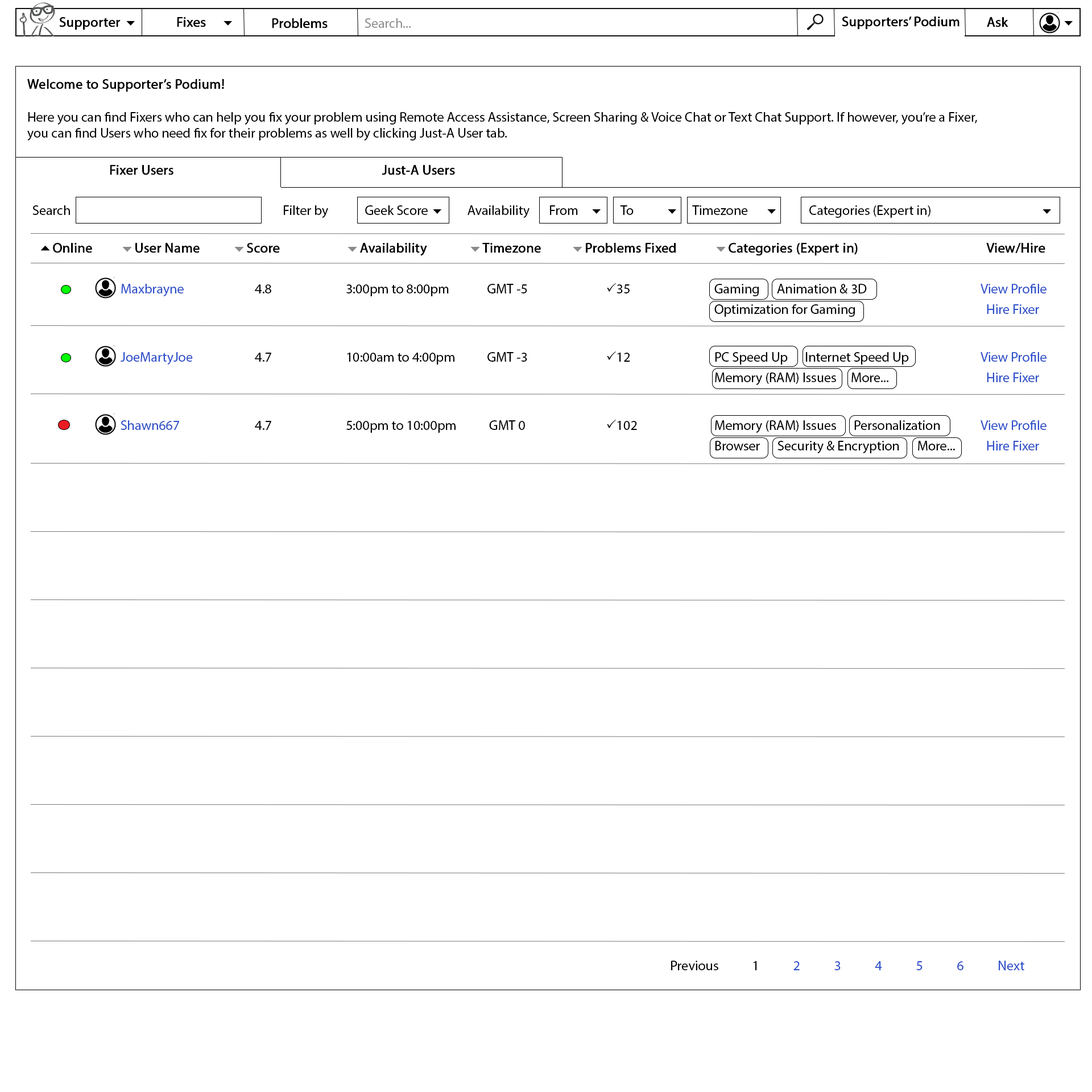
<style>
.page{position:relative;width:1092px;height:1092px;background:#ffffff}
.page>*{position:absolute;margin:0}
.t1{font:13.6px "MyriadPro-Regular";color:#000000;font-weight:bold}
.t2{font:13.6px "MyriadPro-Regular";color:#010000;font-weight:bold}
.t3{font:13.6px "MyriadPro-Regular";color:#919090}
.t4{font:13.6px "MyriadPro-Regular";color:#000000}
.t5{font:13.6px/20.5px "MyriadPro-Regular";color:#000000;font-weight:bold}
.t6{font:13.6px "Webdings";color:#000000}
.t7{font:13.6px/27.3px "MyriadPro-Regular";color:#000000}
.t8{font:13.6px/20.5px "Webdings";color:#000000;font-weight:bold}
.t9{font:13.6px/20.5px "Webdings";color:#8b8b8b;font-weight:bold}
.t10{font:13.6px/20.5px "MyriadPro-Regular";color:#2d4fc9}
.t11{font:13.6px/20.5px "MyriadPro-Regular";color:#000000}
.t12{font:13.6px/20.5px "Wingdings2";color:#000000}
.t13{font:13.6px/27.3px "MyriadPro-Regular";color:#2d4fc9}
.t14{font:13.6px/27.3px "Wingdings2";color:#000000}
.t15{font:13.6px "MyriadPro-Regular";color:#2d4fc9}
</style>
<div class="page">
<p class="t1" style="left:59px;top:17px;width:62px;height:13px">Supporter</p>
<p class="t1" style="left:177px;top:17px;width:29px;height:10px">Fixes</p>
<p class="t2" style="left:842px;top:16px;width:117px;height:14px">Supporters’ Podium</p>
<p class="t1" style="left:987px;top:17px;width:21px;height:10px">Ask</p>
<p class="t1" style="left:272px;top:18px;width:56px;height:10px">Problems</p>
<p class="t3" style="left:365px;top:18px;width:46px;height:10px">Search...</p>
<p class="t4" style="left:27px;top:79px;width:950px;height:96px"><span class="t1">Welcome to Supporter’s Podium!<br><br></span>Here you can find Fixers who can help you fix your problem using Remote Access Assistance, Screen Sharing &amp; Voice Chat or Text Chat Support. If however, you’re a Fixer, <br>you can find Users who need fix for their problems as well by clicking Just-A User tab.<br><br>    <span class="t5">Fixer Users            Just-A Users</span></p>
<p class="t4" style="left:32px;top:205px;width:38px;height:10px">Search</p>
<p class="t4" style="left:284px;top:205px;width:768px;height:13px">Filter by       Geek Score <span class="t6">6</span>  Availability   From    <span class="t6">6</span>      To      <span class="t6">6</span> Timezone      <span class="t6">6</span>      Categories (Expert in)      <span class="t6">6</span></p>
<p class="t7" style="left:40px;top:243px;width:1006px;height:210px"><span class="t8">5</span><span class="t5">Online  </span><span class="t9">6</span><span class="t5">User Name     </span><span class="t9">6</span><span class="t5">Score     </span><span class="t9">6</span><span class="t5">Availability   </span><span class="t9">6</span><span class="t5">Timezone  </span><span class="t9">6</span><span class="t5">Problems Fixed  </span><span class="t9">6</span><span class="t5">Categories (Expert in)        View/Hire<br><br>    </span><span class="t10">Maxbrayne</span><span class="t11">       4.8    3:00pm to 8:00pm             GMT -5         </span><span class="t12">P</span><span class="t11">35     Gaming      Animation &amp; 3D      </span><span class="t10">View Profile<br></span><span class="t11">                                 Optimization for Gaming         </span><span class="t10">Hire Fixer<br><br>    </span><span class="t13">JoeMartyJoe</span>       4.7    10:00am to 4:00pm           GMT -3         <span class="t14">P</span>12     PC Speed Up      Internet Speed Up    <span class="t13">View Profile<br></span><span class="t11">                                 Memory (RAM) Issues     More...       </span><span class="t10">Hire Fixer<br><br>    Shawn667 </span><span class="t11">       4.7    5:00pm to 10:00pm  GMT 0         </span><span class="t14">P</span>102    Memory (RAM) Issues      Personalization  <span class="t13">View Profile<br></span><span class="t11">                                 Browser      Security &amp; Encryption      More...    </span><span class="t10">Hire Fixer</span></p>
<p class="t15" style="left:671px;top:961px;width:353px;height:9px"><span class="t4">Previous  1</span>  2  3  4  5  6  Next</p>
</div>
